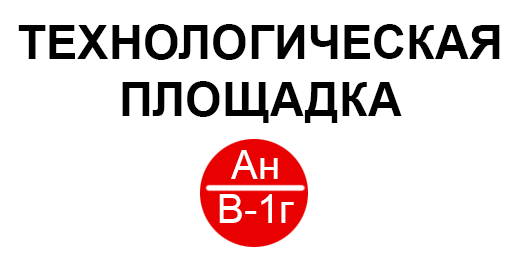
<style>
.page{position:relative;width:512px;height:256px;background:#ffffff}
.page>*{position:absolute;margin:0}
.t1{font:47px "Arial-BoldMT";color:#000000}
.t2{font:40px/44px "ArialMT";color:#ffffff}
</style>
<div class="page">
<p class="t1" style="left:18px;top:24px;width:482px;height:99px;text-align:center">ТЕХНОЛОГИЧЕСКАЯ ПЛОЩАДКА</p>
<p class="t2" style="left:219px;top:150px;width:75px;height:73px;text-align:center">Ан<br>В-1г</p>
</div>
